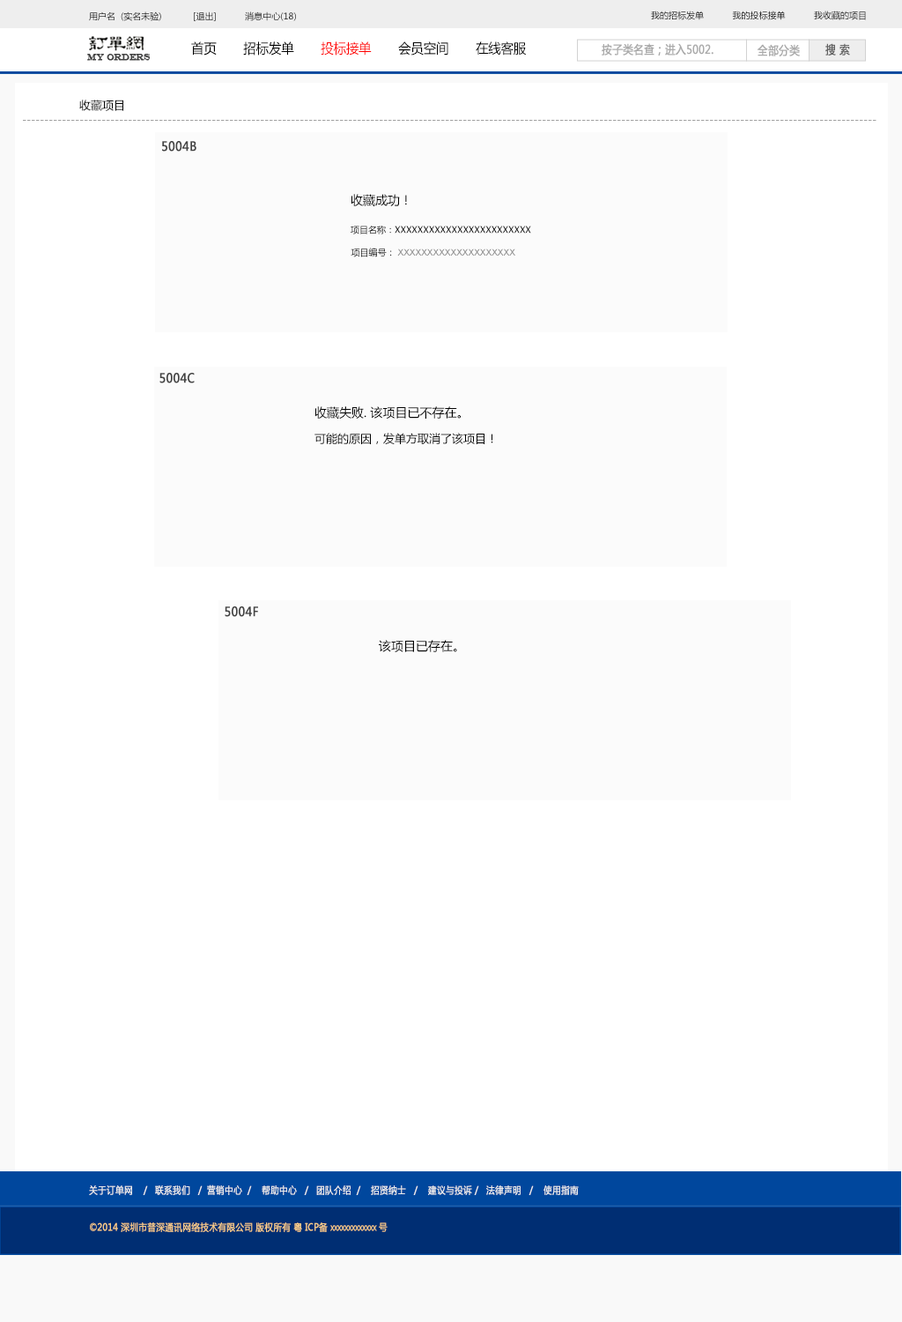
<style>
.page{position:relative;width:902px;height:1322px;background:#ffffff}
.page>*{position:absolute;margin:0}
.t1{font:8.8px "MicrosoftYaHei";color:#000000}
.t2{font:13.6px "MicrosoftYaHei";color:#000000;font-variant:small-caps;scale:0.94 1}
.t3{font:13.6px "MicrosoftYaHei";color:#ff0000;font-variant:small-caps;scale:0.94 1}
.t4{font:8.7px "EngraversMT";color:#434343;font-variant:small-caps;font-weight:bold;scale:0.86 1}
.t5{font:11.6px "MicrosoftYaHei";color:#aaaaaa;font-variant:small-caps;font-weight:bold;scale:0.86 1}
.t6{font:11.6px "MicrosoftYaHei";color:#626262;font-variant:small-caps;font-weight:bold;scale:0.86 1}
.t7{font:11.5px "MicrosoftYaHei";color:#000000}
.t8{font:10.6px "MicrosoftYaHei";color:#a0a0a0}
.t9{font:12.6px "MicrosoftYaHei";color:#434343;font-variant:small-caps;font-weight:bold;scale:0.86 1}
.t10{font:12.3px "MicrosoftYaHei";color:#000000}
.t11{font:10.6px "SimHei";color:#000000}
.t12{font:8.8px "ArialMT";color:#898989}
.t13{font:13.2px "SimHei";color:#000000}
.t14{font:11.5px/26.4px "MicrosoftYaHei";color:#000000}
.t15{font:12.3px/26.4px "MicrosoftYaHei";color:#000000}
.t16{font:9.7px "MicrosoftYaHei";color:#eeeeee;font-variant:small-caps;font-weight:bold;scale:0.86 1}
.t17{font:13.6px "STXihei";color:#eeeeee;font-variant:small-caps;font-weight:bold;scale:0.86 1}
.t18{font:9.7px "MicrosoftYaHei";color:#facd89;font-variant:small-caps;font-weight:bold;scale:0.87 1}
.t19{font:9.7px "MicrosoftYaHei";color:#eeeeee;font-variant:small-caps;font-weight:bold;scale:0.87 1}
</style>
<div class="page">
<p class="t1" style="left:89px;top:11px;width:207px;height:10px">用户名  (实名未验)            [退出]           消息中心(18)</p>
<p class="t1" style="left:651px;top:11px;width:215px;height:9px">我的招标发单           我的投标接单           我收藏的项目</p>
<p class="t2" style="left:191px;top:41px;width:336px;height:15px">首页       招标发单       <span class="t3">投标接单</span>       会员空间       在线客服</p>
<p class="t4" style="left:87px;top:54px;width:64px;height:7px">MY ORDERS</p>
<p class="t5" style="left:602px;top:43px;width:112px;height:13px">按子类名查；进入5002.</p>
<p class="t5" style="left:758px;top:44px;width:42px;height:12px">全部分类</p>
<p class="t6" style="left:826px;top:43px;width:24px;height:13px">搜 索</p>
<p class="t7" style="left:79px;top:100px;width:44px;height:11px">收藏项目</p>
<p class="t8" style="left:23px;top:120px;width:854px;height:1px">--------------------------------------------------------------------------------------------------------------------------------------------------------------------------------------------------</p>
<p class="t9" style="left:162px;top:141px;width:34px;height:11px">5004B</p>
<p class="t10" style="left:351px;top:194px;width:56px;height:12px">收藏成功！</p>
<p class="t1" style="left:351px;top:226px;width:180px;height:8px"><span class="t11"><br></span>项目名称：XXXXXXXXXXXXXXXXXXXXXXXX</p>
<p class="t12" style="left:351px;top:248px;width:164px;height:9px"><span class="t13"> </span><span class="t1">项目编号： </span>XXXXXXXXXXXXXXXXXXXX</p>
<p class="t9" style="left:159px;top:373px;width:36px;height:10px">5004C</p>
<p class="t14" style="left:315px;top:406px;width:178px;height:39px"><span class="t15">收藏失败. 该项目已不存在。<br></span>可能的原因，发单方取消了该项目！</p>
<p class="t9" style="left:225px;top:606px;width:33px;height:11px">5004F</p>
<p class="t10" style="left:379px;top:640px;width:78px;height:12px">该项目已存在。</p>
<p class="t16" style="left:89px;top:1184px;width:490px;height:11px"><span class="t17"><br><br></span>关于订单网    /   联系我们   /  营销中心  /    帮助中心   /   团队介绍  /    招贤纳士   /    建议与投诉 /   法律声明   /    使用指南</p>
<p class="t18" style="left:90px;top:1222px;width:298px;height:10px"><span class="t19"> </span>©2014 深圳市普深通讯网络技术有限公司 版权所有 粤 ICP备 xxxxxxxxxxxxx 号</p>
</div>
